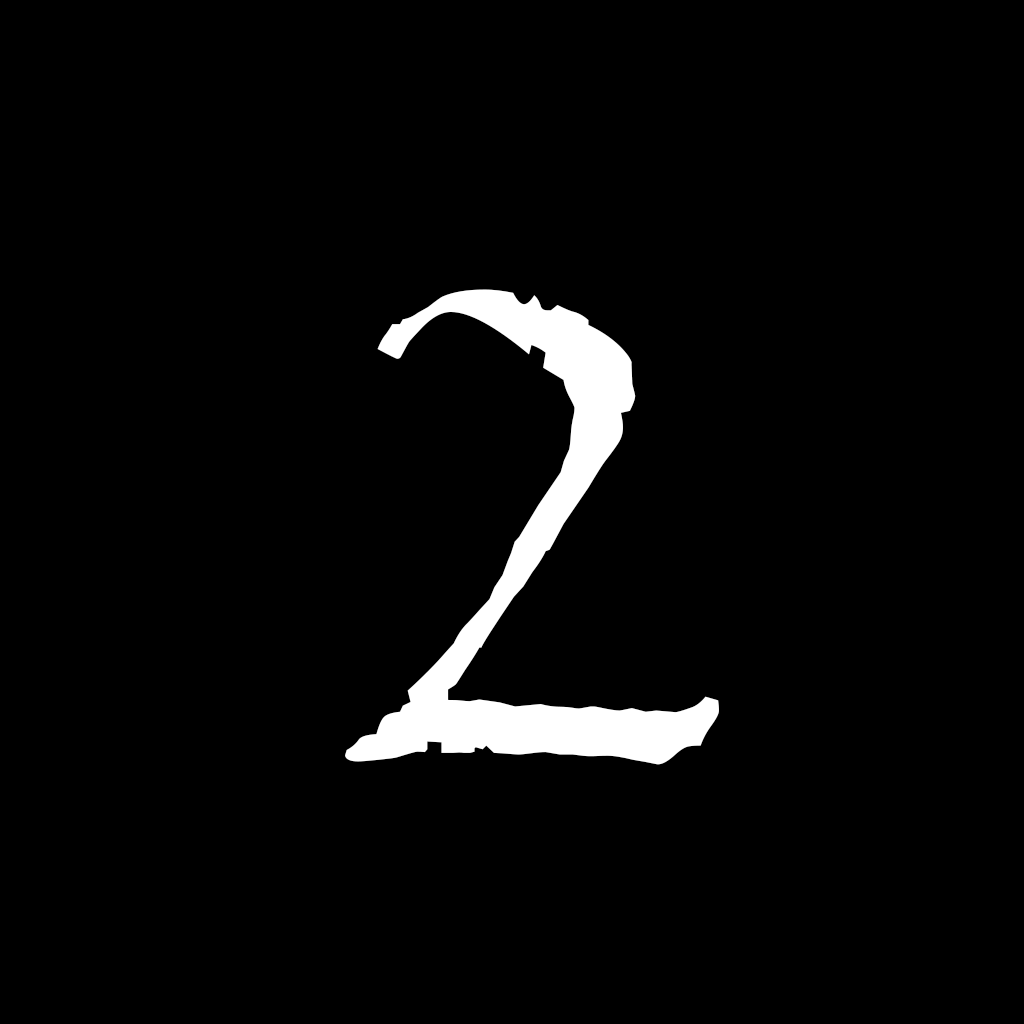
<style>
.page{position:relative;width:1024px;height:1024px;background:#000000}
.page>*{position:absolute;margin:0}
.t1{font:833.3px "Papyrus-Regular";color:#ffffff}
</style>
<div class="page">
<p class="t1" style="left:345px;top:289px;width:374px;height:476px">2</p>
</div>
